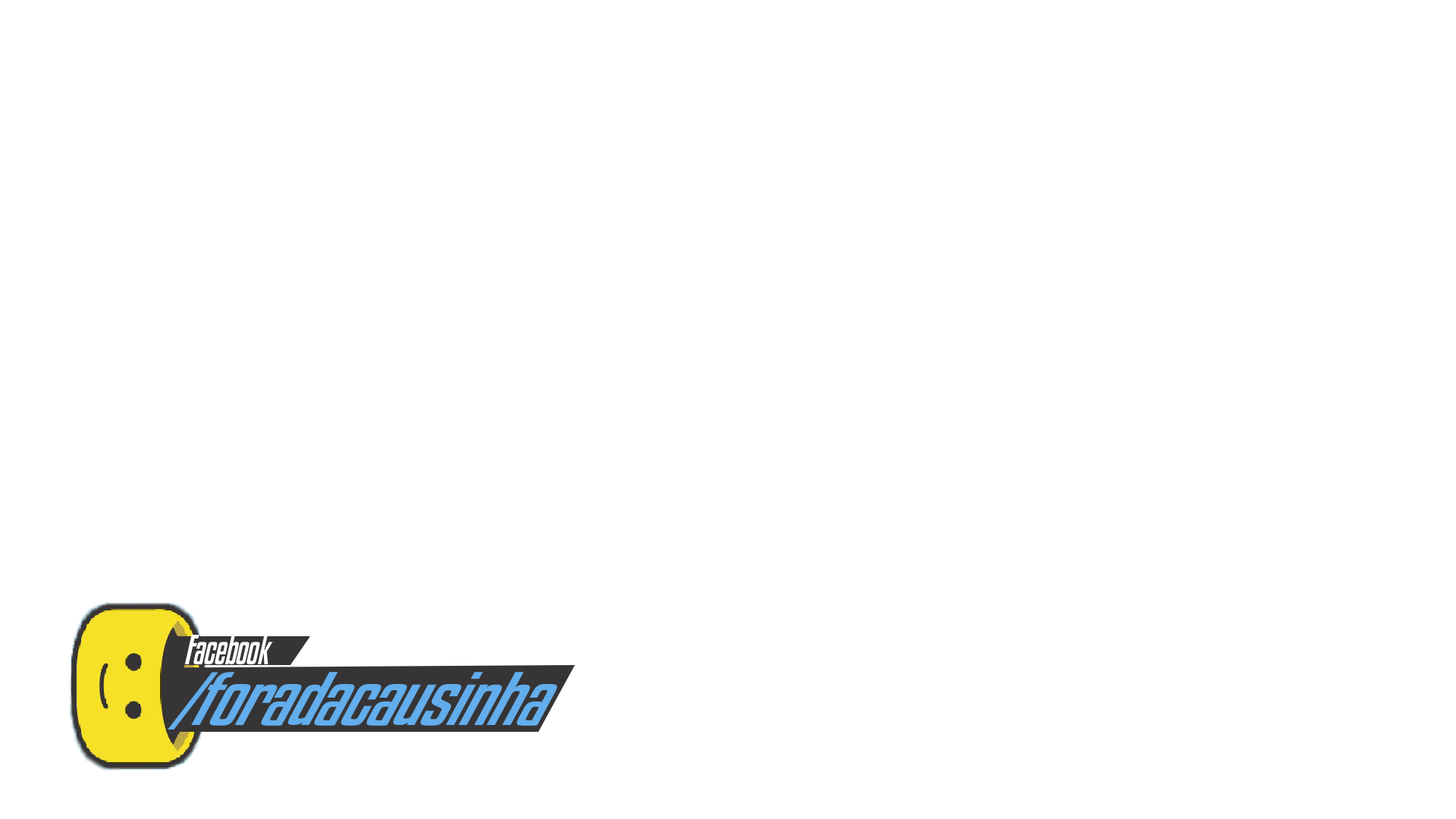
<style>
.page{position:relative;width:1456px;height:819px;background:#ffffff}
.page>*{position:absolute;margin:0}
.t1{font:38.4px "KenyanCoffeeRg-Regular";letter-spacing:-0.03em;color:#ffffff;scale:0.85 1}
.t2{font:76.6px "KenyanCoffeeRg-Regular";letter-spacing:-0.03em;color:#62adec;scale:1.05 1}
.t3{font:69.6px "KenyanCoffeeRg-Regular";letter-spacing:-0.03em;color:#62adec;scale:1.05 1}
</style>
<div class="page">
<p class="t1" style="left:184px;top:635px;width:89px;height:29px">Facebook</p>
<p class="t2" style="left:168px;top:672px;width:389px;height:58px"><span class="t3">/</span>foradacausinha</p>
</div>
